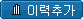
<style>
.page{position:relative;width:83px;height:19px;background:#1a72ac}
.page>*{position:absolute;margin:0}
.t1{font:12px "Gulim";color:#ffffff}
</style>
<div class="page">
<p class="t1" style="left:28px;top:5px;width:47px;height:11px">이력추가</p>
</div>
